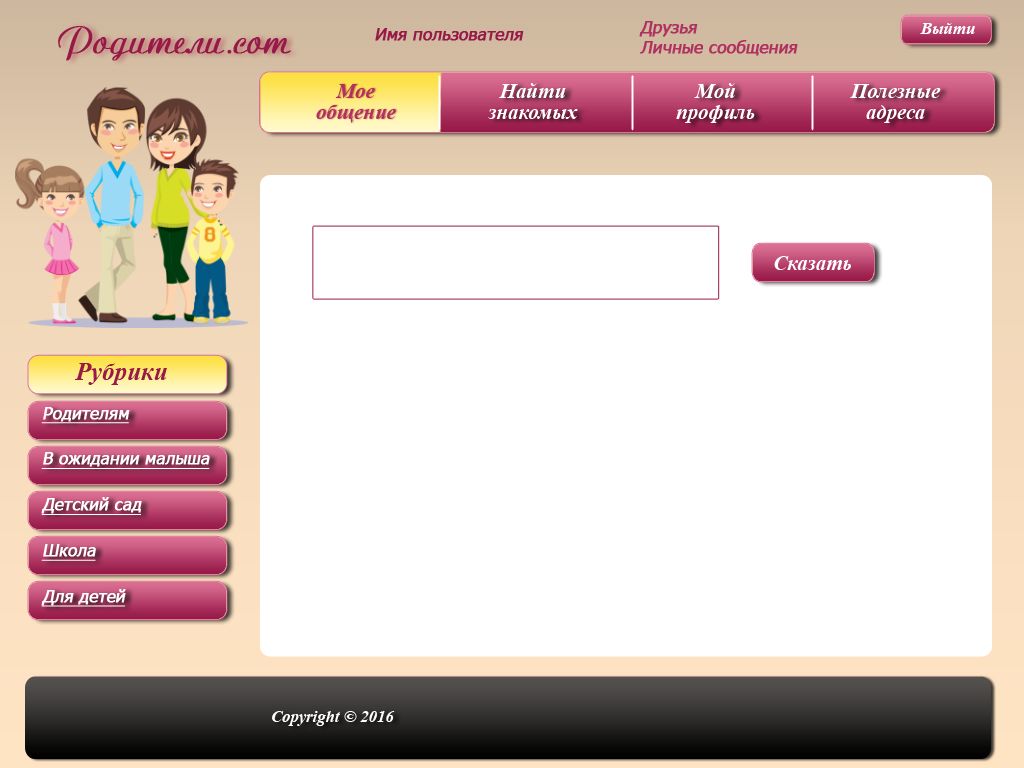
<style>
.page{position:relative;width:1024px;height:768px;background:#ffffff}
.page>*{position:absolute;margin:0}
.t1{font:37.5px "Ariston-Normal";color:#971948;font-weight:bold}
.t2{font:16.7px "Tahoma";color:#971948;font-weight:bold;font-style:italic}
.t3{font:16.7px "Tahoma";color:#b03060;font-weight:bold;font-style:italic}
.t4{font:16.7px "TimesNewRomanPS-BoldItalicMT";color:#ffffff}
.t5{font:20.8px/20.8px "TimesNewRomanPS-BoldItalicMT";color:#b03060}
.t6{font:20.8px/20.8px "TimesNewRomanPS-BoldItalicMT";color:#ffffff}
.t7{font:20.8px "TimesNewRomanPS-BoldItalicMT";color:#ffffff}
.t8{font:25px "TimesNewRomanPS-BoldItalicMT";color:#971948}
.t9{font:16.7px/45.8px "Tahoma";color:#ffffff;font-weight:bold;font-style:italic;text-decoration:underline}
</style>
<div class="page">
<p class="t1" style="left:58px;top:26px;width:233px;height:35px">Родители.com</p>
<p class="t2" style="left:375px;top:28px;width:149px;height:13px">Имя пользователя</p>
<p class="t3" style="left:639px;top:21px;width:159px;height:35px">Друзья<br>Личные сообщения</p>
<p class="t4" style="left:920px;top:23px;width:55px;height:11px">Выйти</p>
<p class="t5" style="left:316px;top:84px;width:80px;height:39px;text-align:center">Мое<br>общение</p>
<p class="t6" style="left:488px;top:83px;width:90px;height:36px;text-align:center">Найти<br>знакомых</p>
<p class="t6" style="left:676px;top:83px;width:79px;height:40px;text-align:center">Мой<br>профиль</p>
<p class="t6" style="left:850px;top:84px;width:91px;height:39px;text-align:center">Полезные<br>адреса</p>
<p class="t7" style="left:774px;top:256px;width:77px;height:14px">Сказать</p>
<p class="t8" style="left:74px;top:363px;width:93px;height:22px">Рубрики</p>
<p class="t9" style="left:41px;top:407px;width:169px;height:200px">Родителям<br>В ожидании малыша<br>Детский сад<br>Школа<br>Для детей</p>
<p class="t4" style="left:272px;top:711px;width:123px;height:15px">Copyright © 2016</p>
</div>
